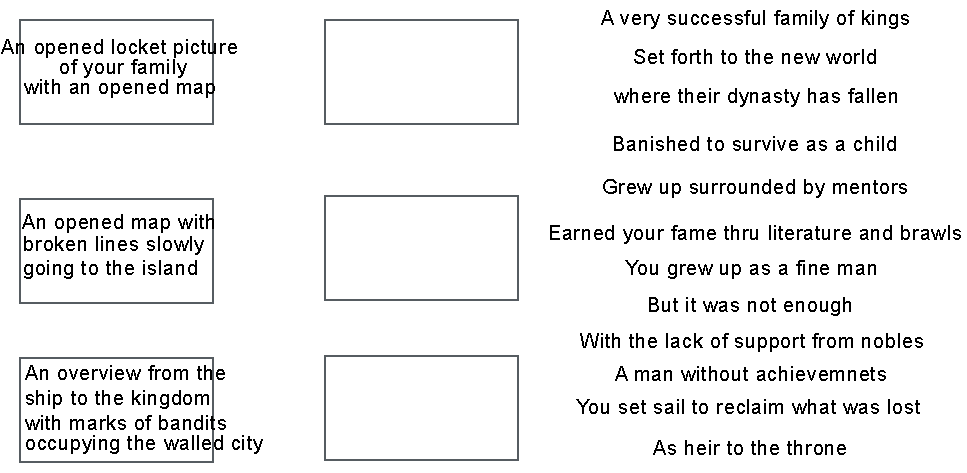
<style>
.page{position:relative;width:967px;height:473px;background:#ffffff}
.page>*{position:absolute;margin:0}
.t1{font:20px "ArialMT";letter-spacing:0.035em;color:#000000}
.t2{font:20px/5px "ArialMT";letter-spacing:0.035em;color:#000000}
</style>
<div class="page">
<p class="t1" style="left:601px;top:10px;width:308px;height:19px">A very successful family of kings</p>
<p class="t2" style="left:1px;top:39px;width:236px;height:39px;text-align:center">An opened locket picture<br><br><br><br> of your family</p>
<p class="t1" style="left:634px;top:49px;width:242px;height:15px">Set forth to the new world</p>
<p class="t1" style="left:24px;top:79px;width:191px;height:19px">with an opened map</p>
<p class="t1" style="left:614px;top:88px;width:283px;height:19px">where their dynasty has fallen</p>
<p class="t1" style="left:614px;top:136px;width:282px;height:15px">Banished to survive as a child</p>
<p class="t1" style="left:603px;top:179px;width:304px;height:19px">Grew up surrounded by mentors</p>
<p class="t1" style="left:22px;top:214px;width:192px;height:19px">An opened map with</p>
<p class="t1" style="left:550px;top:225px;width:411px;height:19px">Earned your fame thru literature and brawls</p>
<p class="t1" style="left:24px;top:236px;width:180px;height:19px">broken lines slowly</p>
<p class="t1" style="left:24px;top:260px;width:173px;height:19px">going to the island</p>
<p class="t1" style="left:625px;top:260px;width:251px;height:19px">You grew up as a fine man</p>
<p class="t1" style="left:649px;top:297px;width:202px;height:19px">But it was not enough</p>
<p class="t1" style="left:580px;top:333px;width:343px;height:19px">With the lack of support from nobles</p>
<p class="t2" style="left:25px;top:365px;width:238px;height:89px">An overview from the<br><br><br><br><br>ship to the kingdom<br><br><br><br><br>with marks of bandits<br><br><br><br>occupying the walled city</p>
<p class="t1" style="left:615px;top:366px;width:271px;height:15px">A man without achievemnets</p>
<p class="t1" style="left:576px;top:399px;width:344px;height:15px">You set sail to reclaim what was lost</p>
<p class="t1" style="left:653px;top:440px;width:193px;height:15px">As heir to the throne</p>
</div>
